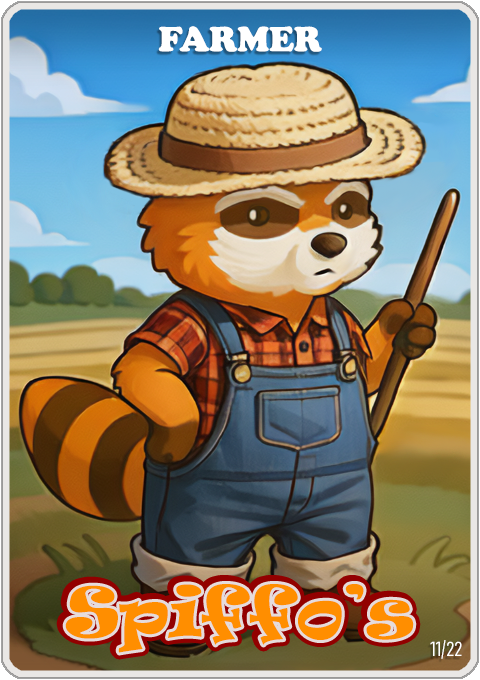
<style>
.page{position:relative;width:480px;height:680px}
.page>*{position:absolute;margin:0}
.t1{font:36px "CooperBlack";color:#ffffff}
.t2{font:65px "Ravie";color:#ff8e00}
.t3{font:20px "Bahnschrift-LightCondensed";color:#ffffff}
</style>
<div class="page">
<p class="t1" style="left:158px;top:26px;width:164px;height:26px">FARMER</p>
<p class="t2" style="left:65px;top:584px;width:349px;height:69px">Spiffo’s</p>
<p class="t3" style="left:430px;top:640px;width:32px;height:19px">11/22</p>
</div>
